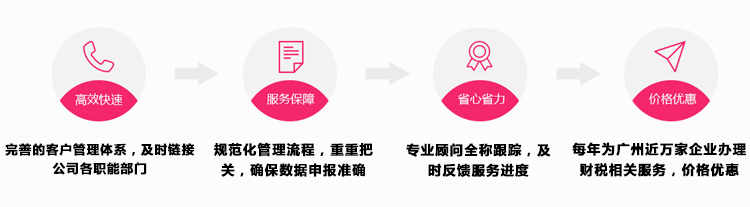
<style>
.page{position:relative;width:750px;height:207px;background:#fcfcfc}
.page>*{position:absolute;margin:0}
.t1{font:12.4px/19.1px "MicrosoftYaHeiUI-Bold";letter-spacing:0.065em;color:#000000;text-transform:uppercase;font-weight:bold}
.t2{font:13.3px/20.5px "MicrosoftYaHeiUI-Bold";letter-spacing:0.065em;color:#000000;text-transform:uppercase;font-weight:bold}
</style>
<div class="page">
<p class="t1" style="left:5px;top:143px;width:190px;height:32px;text-align:center">完善的客户管理体系，及时链接<br>公司各职能部门</p>
<p class="t2" style="left:214px;top:142px;width:159px;height:35px;text-align:center">规范化管理流程，重重把<br>关，确保数据申报准确</p>
<p class="t2" style="left:406px;top:143px;width:145px;height:34px;text-align:center">专业顾问全称跟踪，及<br>时反馈服务进度</p>
<p class="t2" style="left:572px;top:142px;width:174px;height:35px;text-align:center">每年为广州近万家企业办理<br>财税相关服务，价格优惠</p>
</div>
